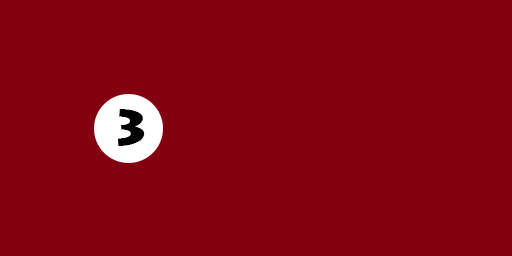
<style>
.page{position:relative;width:512px;height:256px;background:#820010}
.page>*{position:absolute;margin:0}
.t1{font:50px "Lithograph-Bold";color:#000000;scale:1.1 1}
</style>
<div class="page">
<p class="t1" style="left:117px;top:109px;width:28px;height:37px">3</p>
</div>
